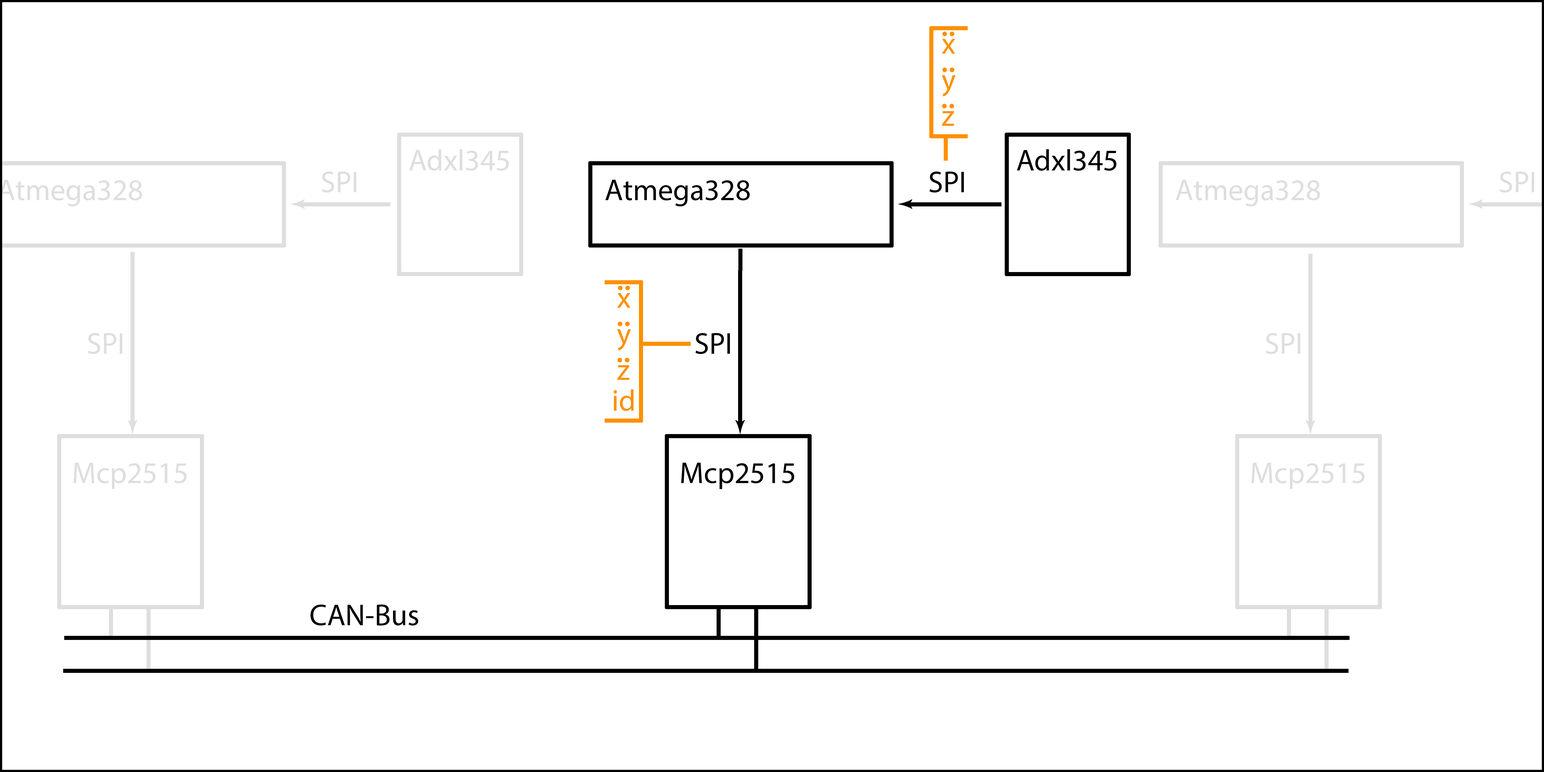
<style>
.page{position:relative;width:1544px;height:772px;background:#ffffff}
.page>*{position:absolute;margin:0}
.t1{font:30.1px "MyriadPro-Regular";color:#ff9000}
.t2{font:30.1px "MyriadPro-Regular";color:#dedede}
.t3{font:30.1px "MyriadPro-Regular";color:#000000}
</style>
<div class="page">
<p class="t1" style="left:942px;top:39px;width:14px;height:87px">x<br>y<br>z</p>
<p class="t2" style="left:409px;top:149px;width:100px;height:22px">Adxl345</p>
<p class="t3" style="left:1017px;top:149px;width:100px;height:22px">Adxl345</p>
<p class="t2" style="left:322px;top:171px;width:34px;height:22px">SPI</p>
<p class="t3" style="left:929px;top:171px;width:35px;height:22px">SPI</p>
<p class="t2" style="left:1500px;top:171px;width:34px;height:22px">SPI</p>
<p class="t3" style="left:605px;top:180px;width:145px;height:27px">Atmega328</p>
<p class="t2" style="left:1176px;top:180px;width:144px;height:27px">Atmega328</p>
<p class="t1" style="left:617px;top:293px;width:14px;height:87px">x<br>y<br>z</p>
<p class="t2" style="left:88px;top:333px;width:34px;height:21px">SPI</p>
<p class="t3" style="left:695px;top:333px;width:35px;height:21px">SPI</p>
<p class="t2" style="left:1266px;top:333px;width:34px;height:21px">SPI</p>
<p class="t1" style="left:614px;top:390px;width:20px;height:21px">id</p>
<p class="t2" style="left:74px;top:463px;width:113px;height:26px">Mcp2515</p>
<p class="t3" style="left:681px;top:463px;width:113px;height:26px">Mcp2515</p>
<p class="t2" style="left:1252px;top:463px;width:113px;height:26px">Mcp2515</p>
<p class="t3" style="left:311px;top:604px;width:107px;height:22px">CAN-Bus</p>
</div>
